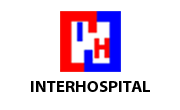
<style>
.page{position:relative;width:180px;height:110px;background:#ffffff}
.page>*{position:absolute;margin:0}
.t1{font:15.9px "MyriadPro-Bold";color:#000000;scale:1.07 1}
</style>
<div class="page">
<p class="t1" style="left:31px;top:81px;width:119px;height:11px">INTERHOSPITAL</p>
</div>
